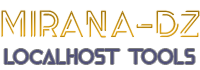
<style>
.page{position:relative;width:200px;height:70px;background:#ffffff}
.page>*{position:absolute;margin:0}
.t1{font:37.5px "arc-Regular"}
.t2{font:20.8px "Aveden";color:#505078}
</style>
<div class="page">
<p class="t1" style="left:1px;top:10px;width:199px;height:28px">mirana-dz</p>
<p class="t2" style="left:4px;top:49px;width:191px;height:15px">LOCALHOST TOOLS</p>
</div>
